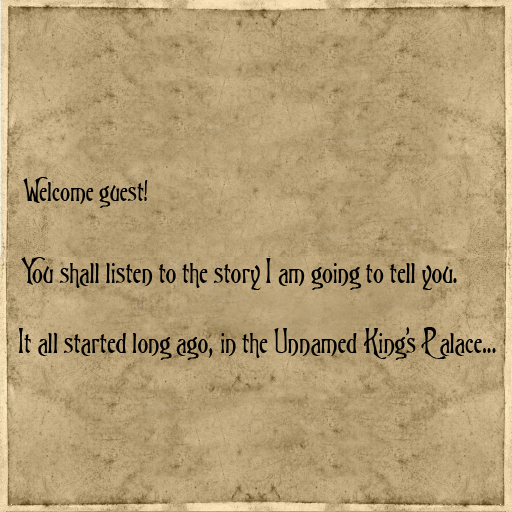
<style>
.page{position:relative;width:512px;height:512px}
.page>*{position:absolute;margin:0}
.t1{font:28px "TriniganFG";color:#000000}
.t2{font:30px "TriniganFG";color:#000000}
</style>
<div class="page">
<p class="t1" style="left:23px;top:177px;width:125px;height:31px">Welcome guest!</p>
<p class="t2" style="left:21px;top:257px;width:436px;height:33px">You shall listen to the story I am going to tell you.</p>
<p class="t2" style="left:18px;top:327px;width:478px;height:33px">It all started long ago, in the Unnamed King’s Palace...</p>
</div>
